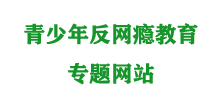
<style>
.page{position:relative;width:220px;height:100px;background:#ffffff}
.page>*{position:absolute;margin:0}
.t1{font:21.9px/39.4px "FZCHSJW--GB1-0";color:#16952b}
</style>
<div class="page">
<p class="t1" style="left:24px;top:23px;width:174px;height:62px;text-align:center">青少年反网瘾教育<br>专题网站</p>
</div>
